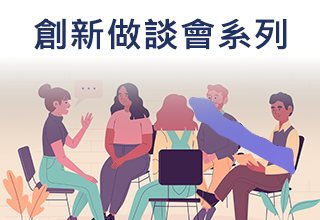
<style>
.page{position:relative;width:320px;height:220px}
.page>*{position:absolute;margin:0}
.t1{font:34.4px "MicrosoftJhengHeiBold";letter-spacing:0.01em;color:#203265;scale:1.06 1}
</style>
<div class="page">
<p class="t1" style="left:34px;top:18px;width:253px;height:32px">創新做談會系列</p>
</div>
